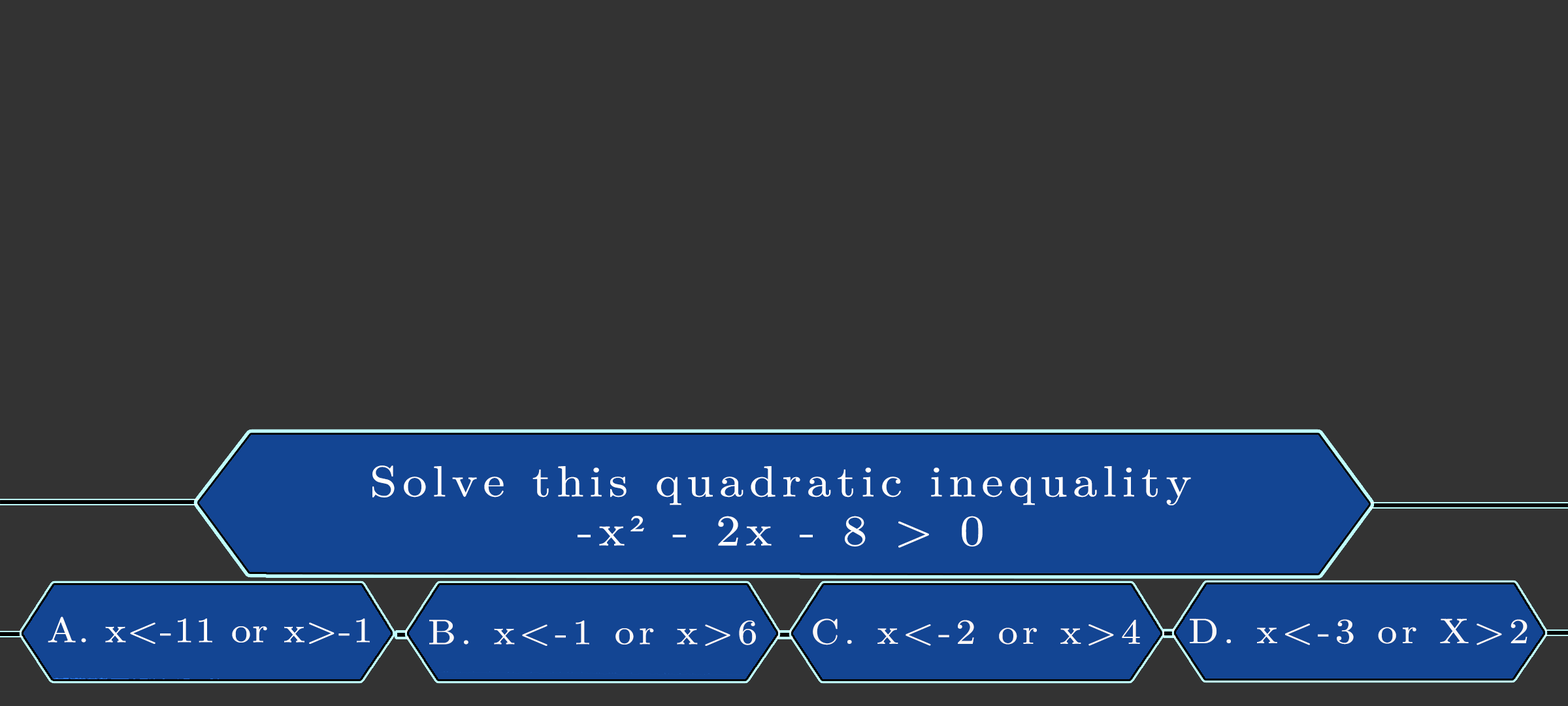
<style>
.page{position:relative;width:1568px;height:706px;background:#333333}
.page>*{position:absolute;margin:0}
.t1{font:43.6px/49px "LatinModernMath-Regular";letter-spacing:0.115em;color:#ffffff;scale:1.12 1}
.t2{font:43.6px/49px "TimesNewRomanPSMT";letter-spacing:0.115em;color:#ffffff;scale:1.12 1}
.t3{font:35.4px "LatinModernMath-Regular";letter-spacing:0.035em;color:#fffefe;scale:1.12 1}
.t4{font:35.4px "LatinModernMath-Regular";letter-spacing:0.035em;color:#fffefe;text-transform:uppercase;scale:1.12 1}
.t5{font:35.4px "LatinModernMath-Regular";letter-spacing:0.115em;color:#fdf9f9;scale:1.12 1}
.t6{font:35.4px "LatinModernMath-Regular";letter-spacing:0.115em;color:#fdf9f9;text-transform:uppercase;scale:1.12 1}
.t7{font:35.4px "LatinModernMath-Regular";letter-spacing:0.115em;color:#fcf7f7;scale:1.12 1}
.t8{font:35.4px "LatinModernMath-Regular";letter-spacing:0.115em;color:#fcf7f7;text-transform:uppercase;scale:1.12 1}
.t9{font:35.4px "LatinModernMath-Regular";letter-spacing:0.115em;color:#fbf8f8;scale:1.12 1}
.t10{font:35.4px "LatinModernMath-Regular";letter-spacing:0.115em;color:#fbf8f8;text-transform:uppercase;scale:1.12 1}
</style>
<div class="page">
<p class="t1" style="left:372px;top:465px;width:819px;height:82px;text-align:center">Solve this quadratic inequality<br>-x<span class="t2">²</span> - 2x - 8 &gt; 0</p>
<p class="t3" style="left:48px;top:616px;width:322px;height:28px"><span class="t4">a. </span>x&lt;-11 or x<span class="t4">&gt;-1</span></p>
<p class="t5" style="left:429px;top:619px;width:327px;height:26px"><span class="t6">b. </span>x&lt;-1 or x<span class="t6">&gt;6</span></p>
<p class="t7" style="left:813px;top:618px;width:327px;height:27px"><span class="t8">c. </span>x&lt;-2 or x&gt;<span class="t8">4</span></p>
<p class="t9" style="left:1190px;top:618px;width:337px;height:27px"><span class="t10">d. </span>x&lt;-3 or <span class="t10">x&gt;2</span></p>
</div>
